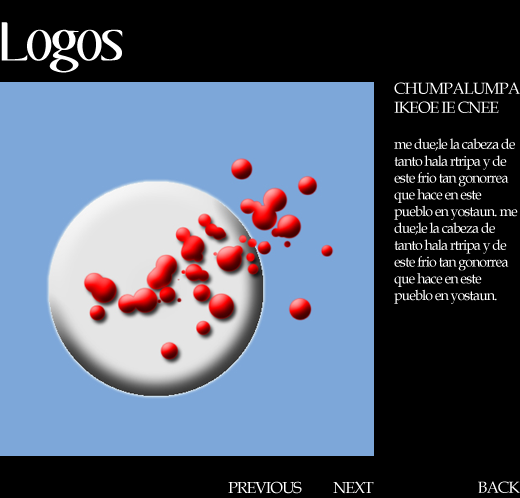
<style>
.page{position:relative;width:520px;height:498px;background:#000000}
.page>*{position:absolute;margin:0}
.t1{font:48px "Aubrey";letter-spacing:-0.06em;color:#ffffff}
.t2{font:14px "BookAntiqua";letter-spacing:-0.06em;color:#ffffff}
.t3{font:16px "BookAntiqua";letter-spacing:-0.06em;color:#ffffff}
</style>
<div class="page">
<p class="t1" style="left:1px;top:22px;width:122px;height:51px">Logos</p>
<p class="t2" style="left:394px;top:82px;width:126px;height:222px;text-align:justify"><span class="t3">CHUMPALUMPA IKEOE IE CNEE<br><br></span>me due;le la cabeza de tanto hala rtripa y de este frio tan gonorrea que hace en este pueblo en yostaun. me due;le la cabeza de tanto hala rtripa y de este frio tan gonorrea que hace en este pueblo en yostaun.</p>
<p class="t3" style="left:228px;top:481px;width:74px;height:13px">PREVIOUS</p>
<p class="t3" style="left:333px;top:481px;width:41px;height:13px">NEXT</p>
<p class="t3" style="left:478px;top:481px;width:42px;height:12px">BACK</p>
</div>
